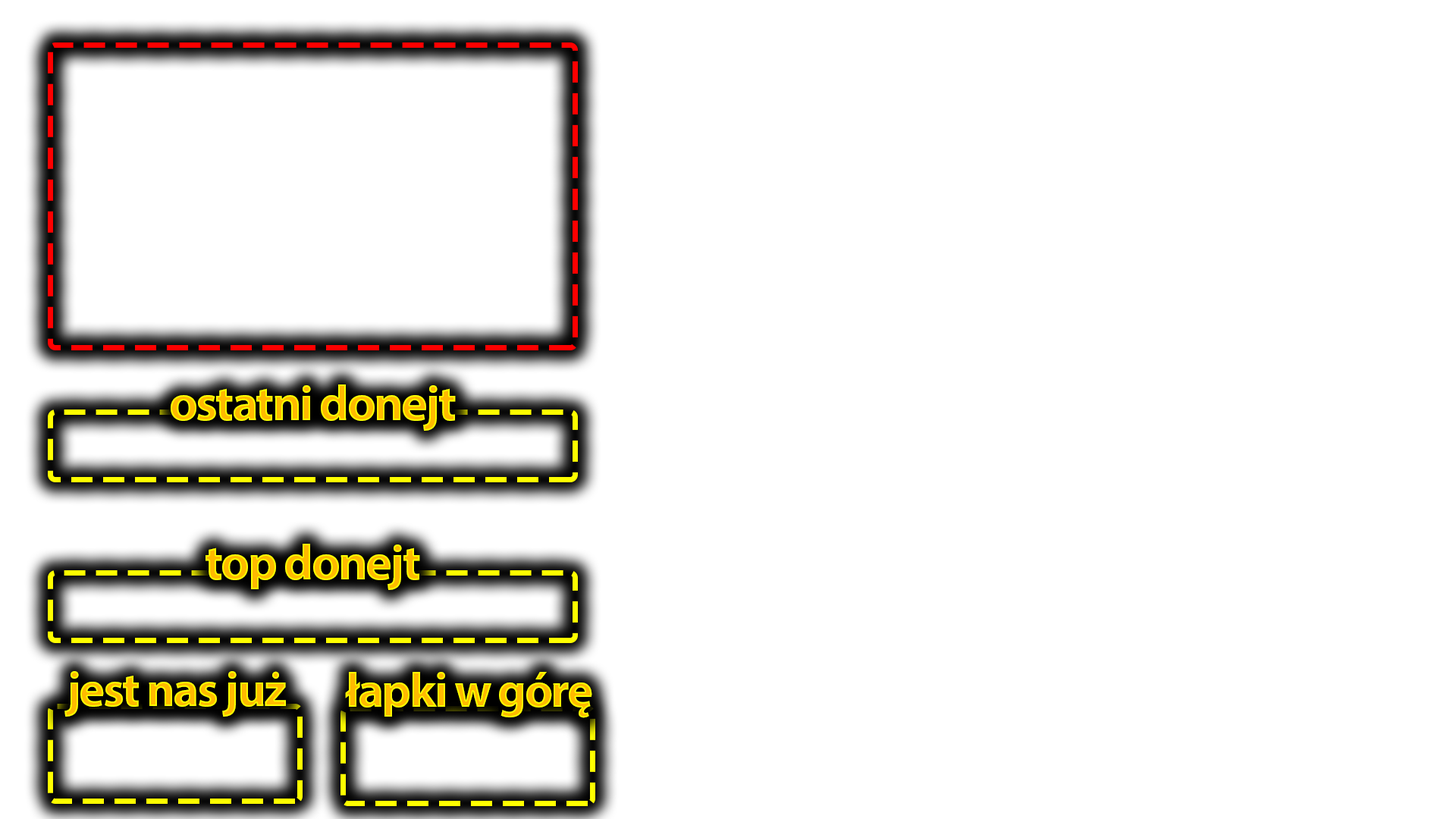
<style>
.page{position:relative;width:1456px;height:819px;background:#ffffff}
.page>*{position:absolute;margin:0}
.t1{font:50px "MyriadPro-Bold";letter-spacing:-0.04em}
.t2{font:49.3px "MyriadPro-Bold";letter-spacing:-0.04em}
</style>
<div class="page">
<p class="t1" style="left:171px;top:384px;width:285px;height:47px">ostatni donejt</p>
<p class="t1" style="left:206px;top:544px;width:214px;height:46px">top donejt</p>
<p class="t2" style="left:64px;top:671px;width:222px;height:46px">jest nas już</p>
<p class="t2" style="left:345px;top:672px;width:247px;height:46px">łapki w górę</p>
</div>
